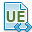
<style>
.page{position:relative;width:32px;height:32px;background:#ffffff}
.page>*{position:absolute;margin:0}
.t1{font:18px "Consolas-Bold";color:#547834}
</style>
<div class="page">
<p class="t1" style="left:6px;top:11px;width:19px;height:11px">UE</p>
</div>
